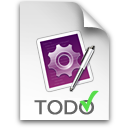
<style>
.page{position:relative;width:128px;height:128px;background:#ffffff}
.page>*{position:absolute;margin:0}
.t1{font:20px "GillSans";letter-spacing:-0.025em;color:#656565;font-weight:bold}
.t2{font:28px "LucidaGrande";letter-spacing:-0.025em;color:#58dd4b;font-weight:bold}
</style>
<div class="page">
<p class="t1" style="left:34px;top:100px;width:60px;height:15px">TODO</p>
<p class="t2" style="left:79px;top:90px;width:20px;height:22px">✓</p>
</div>
